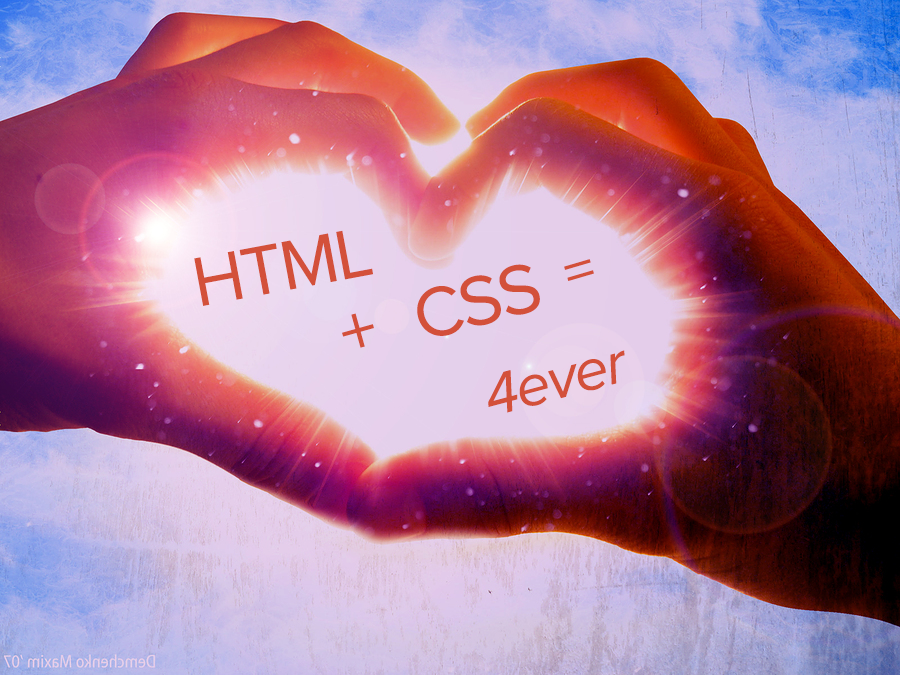
<style>
.page{position:relative;width:900px;height:675px}
.page>*{position:absolute;margin:0}
.t1{font:72px "ProximaNova-Regular";letter-spacing:-0.025em;color:#d3503a}
.t2{font:60px "ProximaNova-Regular";letter-spacing:-0.025em;color:#d3503a}
.t3{font:60px "ProximaNova-RegularIt";letter-spacing:-0.025em;color:#d3503a}
</style>
<div class="page">
<p class="t1" style="left:194px;top:230px;width:179px;height:76px;rotate:-11deg">HTML</p>
<p class="t1" style="left:417px;top:264px;width:123px;height:72px;rotate:-15deg">CSS</p>
<p class="t2" style="left:564px;top:259px;width:30px;height:22px;rotate:-16deg">=</p>
<p class="t1" style="left:342px;top:313px;width:32px;height:35px;rotate:-16deg">+</p>
<p class="t3" style="left:488px;top:350px;width:137px;height:63px;rotate:-15deg">4ever</p>
</div>
